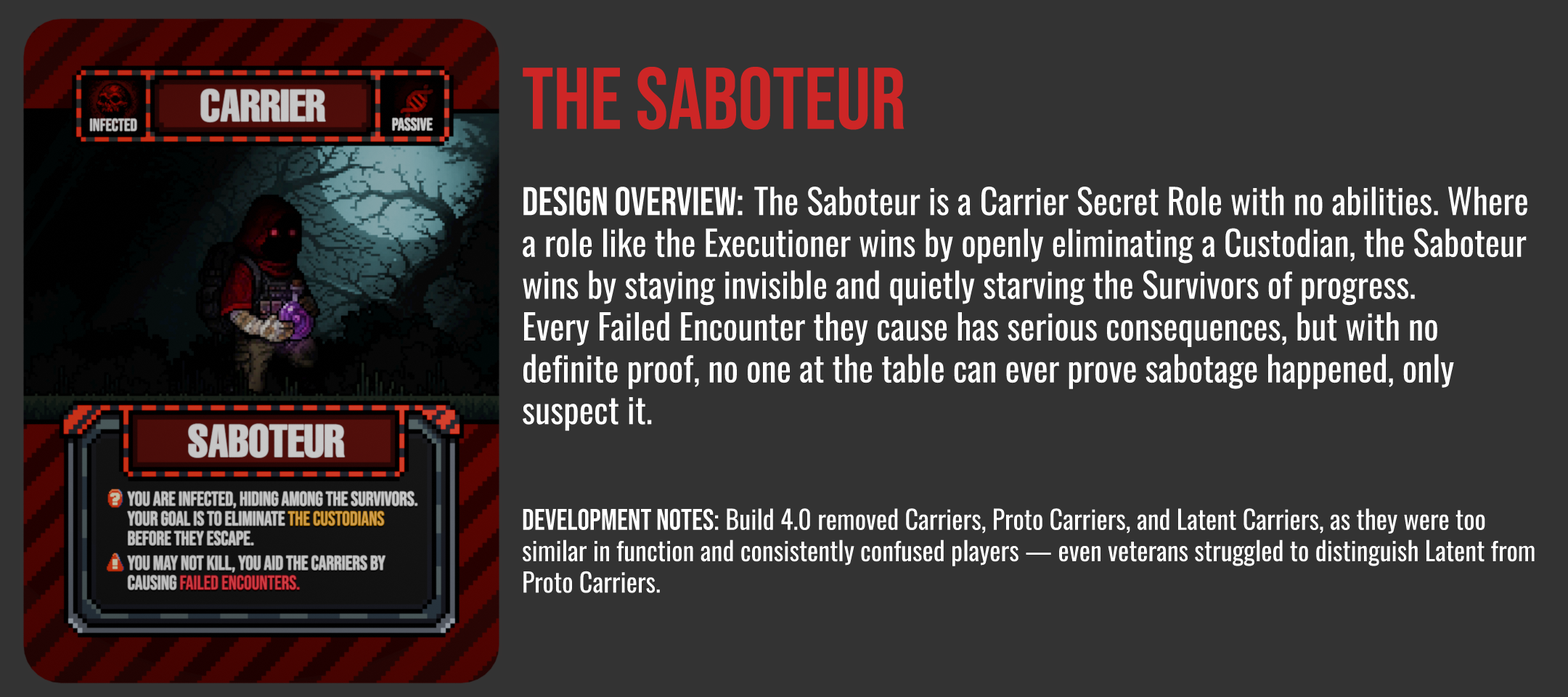
<style>
.page{position:relative;width:1568px;height:697px;background:#333333}
.page>*{position:absolute;margin:0}
.t1{font:87.1px "BebasNeue-Regular";color:#cd2626}
.t2{font:34.8px "Oswald-Regular";color:#ffffff}
.t3{font:39.9px "BebasNeue-Regular";color:#ffffff}
.t4{font:26.1px "Oswald-Regular";color:#ffffff}
.t5{font:29.8px "BebasNeue-Regular";color:#ffffff}
</style>
<div class="page">
<p class="t1" style="left:523px;top:67px;width:382px;height:63px">THE SABOTEUR</p>
<p class="t2" style="left:523px;top:187px;width:1004px;height:244px"><span class="t3">Design Overview: </span>The Saboteur is a Carrier Secret Role with no abilities. Where a role like the Executioner wins by openly eliminating a Custodian, the Saboteur wins by staying invisible and quietly starving the Survivors of progress. <br>Every Failed Encounter they cause has serious consequences, but with no definite proof, no one at the table can ever prove sabotage happened, only suspect it.</p>
<p class="t4" style="left:523px;top:508px;width:1012px;height:85px"><span class="t5">development Notes:</span> Build 4.0 removed Carriers, Proto Carriers, and Latent Carriers, as they were too similar in function and consistently confused players — even veterans struggled to distinguish Latent from Proto Carriers.</p>
</div>
